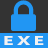
<style>
.page{position:relative;width:48px;height:48px;background:#333333}
.page>*{position:absolute;margin:0}
.t1{font:13px "SegoeUI-Bold";letter-spacing:0.18em;color:#f2f3f2;scale:1.5 1}
</style>
<div class="page">
<p class="t1" style="left:4px;top:36px;width:40px;height:9px">EXE</p>
</div>
